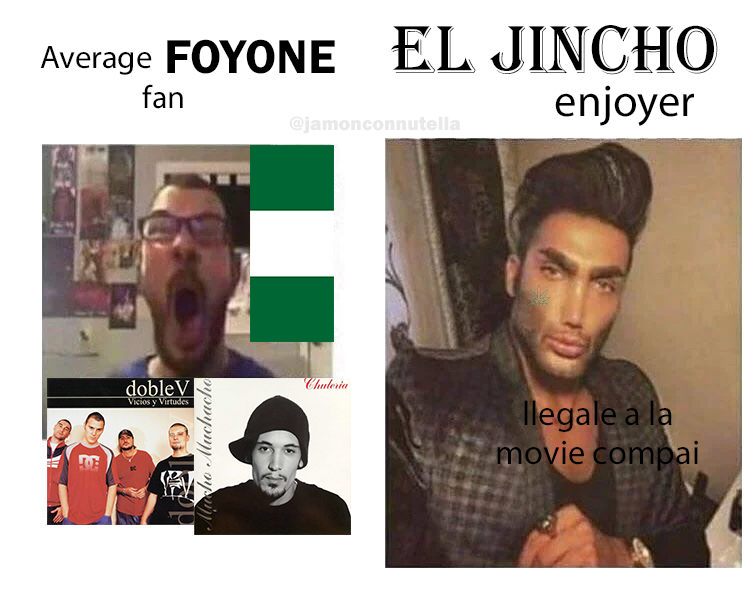
<style>
.page{position:relative;width:750px;height:592px;background:#ffffff}
.page>*{position:absolute;margin:0}
.t1{font:70.1px "Algerian";color:#000000}
.t2{font:49px "FranklinGothic-Demi";color:#000000}
.t3{font:32.8px "MyriadPro-Regular";color:#000000}
.t4{font:32.3px "MyriadPro-Regular";color:#000000}
.t5{font:44.9px "MyriadPro-Regular";color:#000000}
.t6{font:19.8px "FranklinGothic-Heavy";color:#e9e9e9}
.t7{font:34.6px "MyriadPro-Regular";color:#000000}
</style>
<div class="page">
<p class="t1" style="left:391px;top:25px;width:327px;height:50px">EL JINCHO</p>
<p class="t2" style="left:167px;top:39px;width:168px;height:35px">FOYONE</p>
<p class="t3" style="left:40px;top:46px;width:112px;height:29px">Average</p>
<p class="t4" style="left:142px;top:84px;width:41px;height:25px">fan</p>
<p class="t5" style="left:555px;top:85px;width:139px;height:41px">enjoyer</p>
<p class="t6" style="left:289px;top:116px;width:171px;height:18px">@jamonconnutella</p>
<p class="t7" style="left:497px;top:400px;width:201px;height:71px;text-align:center">llegale a la<br>movie compai</p>
</div>
